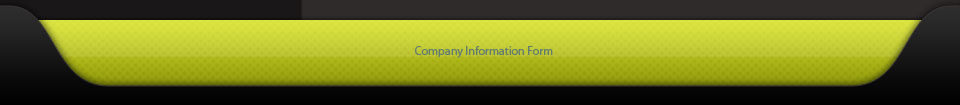
<style>
.page{position:relative;width:960px;height:105px}
.page>*{position:absolute;margin:0}
.t1{font:12px "MyriadPro-Regular";color:#637c70}
</style>
<div class="page">
<p class="t1" style="left:415px;top:46px;width:138px;height:12px">Company Information Form</p>
</div>
